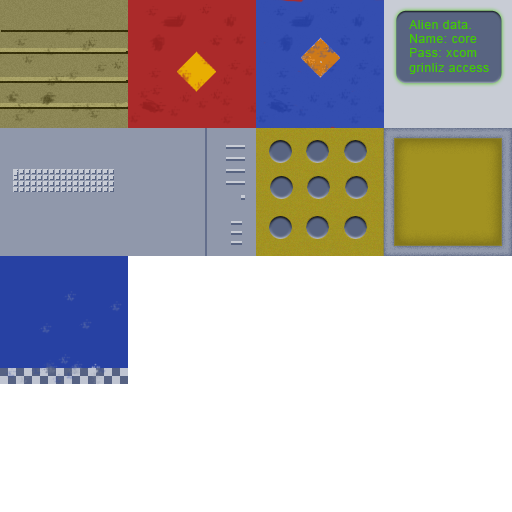
<style>
.page{position:relative;width:512px;height:512px;background:#ffffff}
.page>*{position:absolute;margin:0}
.t1{font:12px "ArialMT";letter-spacing:0.05em;color:#42cc03}
</style>
<div class="page">
<p class="t1" style="left:409px;top:20px;width:80px;height:54px">Alien data.<br>Name: core<br>Pass: xcom<br>grinliz access</p>
</div>
